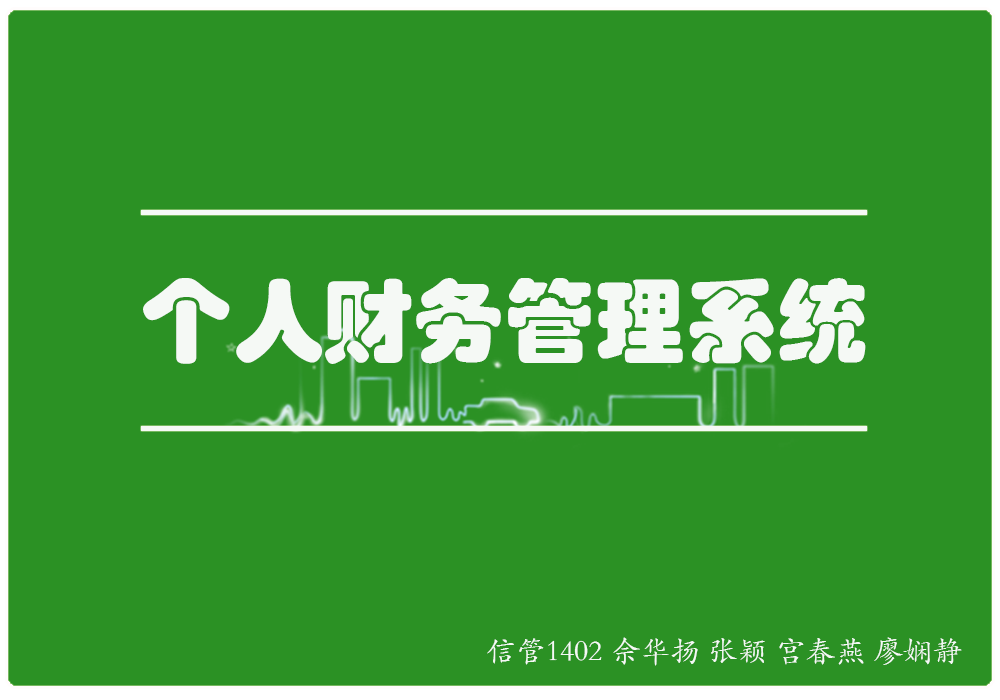
<style>
.page{position:relative;width:1000px;height:700px;background:#2b9124}
.page>*{position:absolute;margin:0}
.t1{font:91px "STHupo";color:#f5f9f5}
.t2{font:30px "STKaiti";color:#f5f9f5}
</style>
<div class="page">
<p class="t1" style="left:143px;top:278px;width:723px;height:86px">个人财务管理系统</p>
<p class="t2" style="left:487px;top:637px;width:475px;height:29px">信管1402 佘华扬 张颖 宫春燕 廖娴静</p>
</div>
